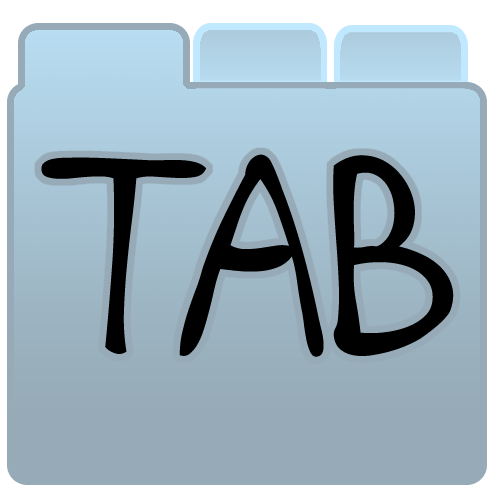
<style>
.page{position:relative;width:500px;height:500px;background:#96abb7}
.page>*{position:absolute;margin:0}
.t1{font:354.4px "tykayn";color:#000000}
.t2{font:385.2px "tykayn";color:#000000}
</style>
<div class="page">
<p class="t1" style="left:41px;top:157px;width:165px;height:197px">t</p>
<p class="t2" style="left:179px;top:154px;width:275px;height:203px">ab</p>
</div>
